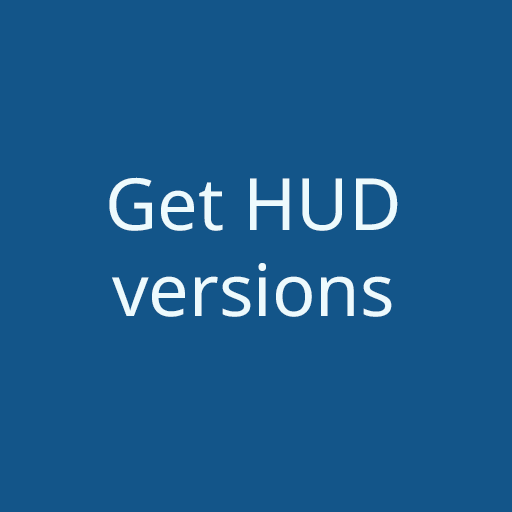
<style>
.page{position:relative;width:512px;height:512px;background:#135589}
.page>*{position:absolute;margin:0}
.t1{font:72px "NotoSans-Regular";color:#edfafd}
</style>
<div class="page">
<p class="t1" style="left:109px;top:177px;width:289px;height:140px;text-align:center">Get HUD versions</p>
</div>
